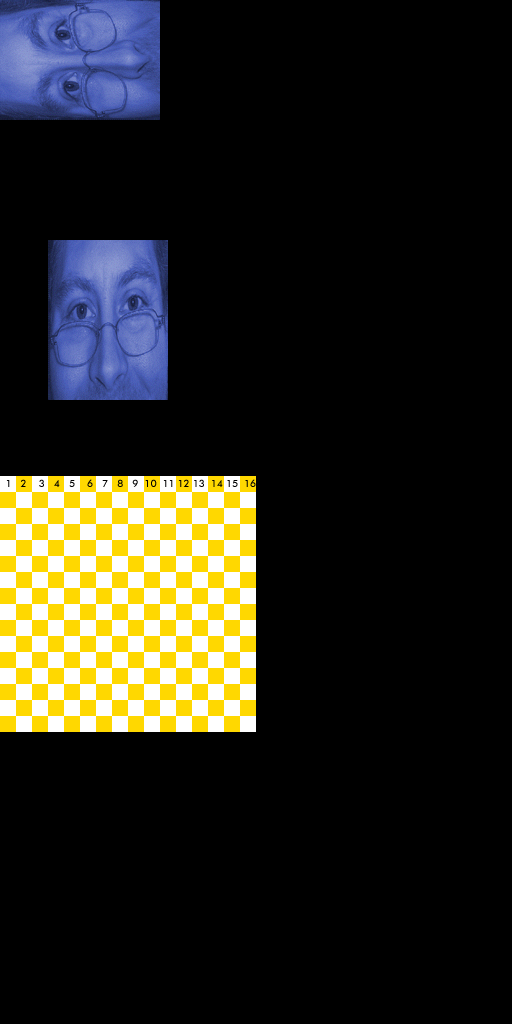
<style>
.page{position:relative;width:512px;height:1024px;background:#000000}
.page>*{position:absolute;margin:0}
.t1{font:10px "FuturaBT-Medium";color:#000000}
</style>
<div class="page">
<p class="t1" style="left:6px;top:479px;width:250px;height:8px">1   2    3   4   5    6   7   8   9  10  11 12 13  14 15  16</p>
</div>
